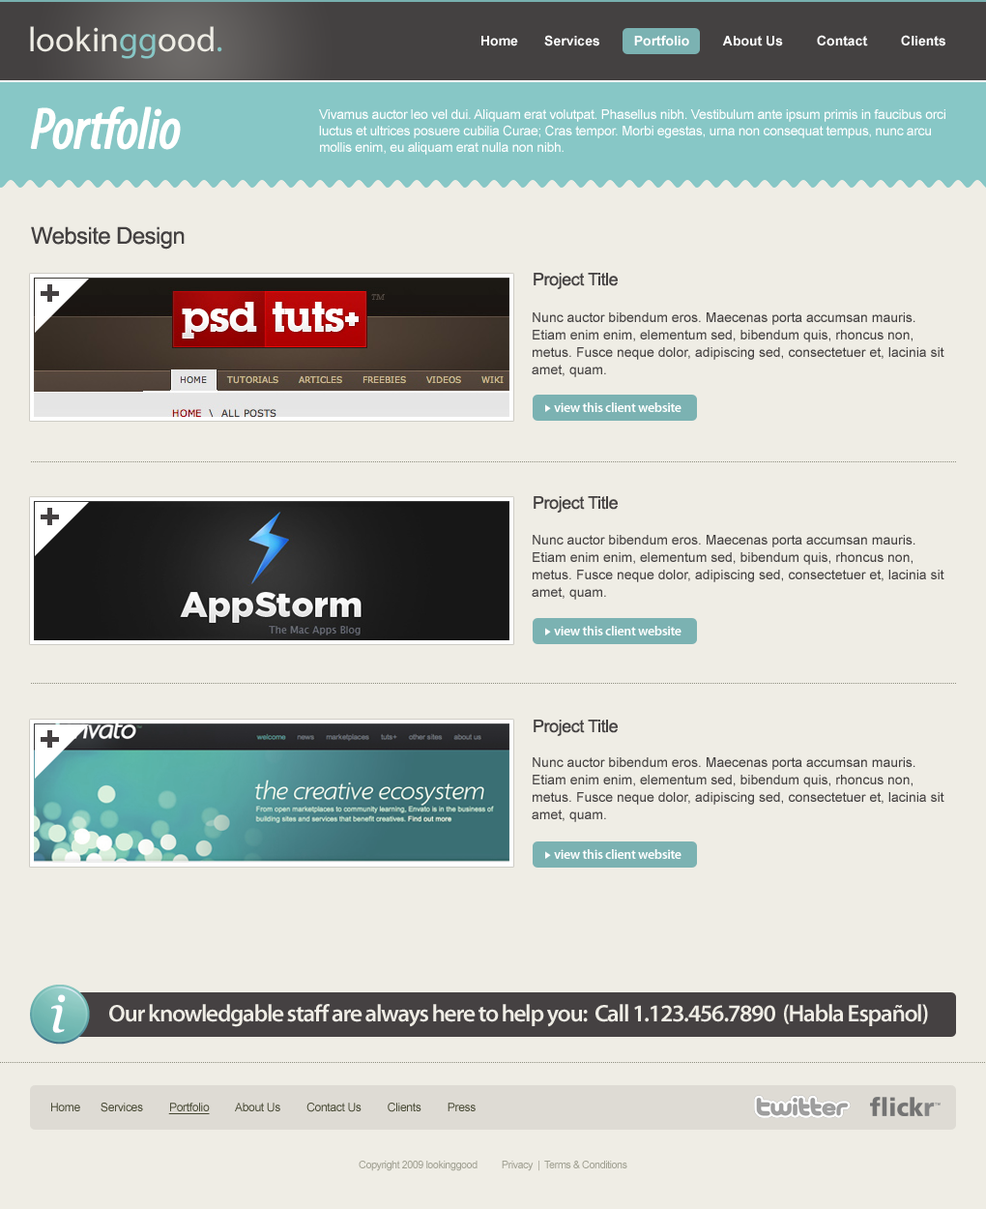
<style>
.page{position:relative;width:986px;height:1209px;background:#efede5}
.page>*{position:absolute;margin:0}
.t1{font:34.8px "MyriadPro-Regular";color:#efede5}
.t2{font:34.8px "MyriadPro-Regular";color:#87c7c6}
.t3{font:13.5px "Arial-BoldMT";color:#ffffff}
.t4{font:58px "MyriadPro-CondIt";letter-spacing:-0.025em;color:#fffffe;font-weight:bold}
.t5{font:13.5px "ArialMT";letter-spacing:-0.025em;color:#ffffff}
.t6{font:23.2px "ArialMT";letter-spacing:-0.025em;color:#444141}
.t7{font:17.4px "ArialMT";letter-spacing:-0.025em;color:#444141}
.t8{font:13.5px/17.4px "ArialMT";color:#444141}
.t9{font:13.5px "MyriadPro-Semibold";letter-spacing:-0.025em;color:#ffffff}
.t10{font:24.2px "MyriadPro-Semibold";letter-spacing:-0.05em;color:#efede5}
.t11{font:11.6px "ArialMT";letter-spacing:-0.025em;color:#464833}
.t12{font:11.6px "ArialMT";letter-spacing:-0.025em;color:#464833;text-decoration:underline}
.t13{font:10.6px "ArialMT";letter-spacing:-0.05em;color:#a1a193}
</style>
<div class="page">
<p class="t1" style="left:30px;top:26px;width:192px;height:33px">lookin<span class="t2">gg</span>ood<span class="t2">.</span></p>
<p class="t3" style="left:482px;top:35px;width:464px;height:11px">Home       Services         Portfolio         About Us         Contact         Clients</p>
<p class="t4" style="left:30px;top:106px;width:151px;height:44px">Portfolio</p>
<p class="t5" style="left:319px;top:109px;width:627px;height:46px">Vivamus auctor leo vel dui. Aliquam erat volutpat. Phasellus nibh. Vestibulum ante ipsum primis in faucibus orci luctus et ultrices posuere cubilia Curae; Cras tempor. Morbi egestas, urna non consequat tempus, nunc arcu mollis enim, eu aliquam erat nulla non nibh.</p>
<p class="t6" style="left:31px;top:226px;width:154px;height:24px">Website Design</p>
<p class="t7" style="left:534px;top:273px;width:84px;height:16px">Project Title</p>
<p class="t8" style="left:532px;top:312px;width:413px;height:65px">Nunc auctor bibendum eros. Maecenas porta accumsan mauris. Etiam enim enim, elementum sed, bibendum quis, rhoncus non, metus. Fusce neque dolor, adipiscing sed, consectetuer et, lacinia sit amet, quam.</p>
<p class="t9" style="left:554px;top:402px;width:128px;height:10px">view this client website</p>
<p class="t7" style="left:534px;top:496px;width:84px;height:17px">Project Title</p>
<p class="t8" style="left:532px;top:535px;width:413px;height:65px">Nunc auctor bibendum eros. Maecenas porta accumsan mauris. Etiam enim enim, elementum sed, bibendum quis, rhoncus non, metus. Fusce neque dolor, adipiscing sed, consectetuer et, lacinia sit amet, quam.</p>
<p class="t9" style="left:554px;top:626px;width:128px;height:9px">view this client website</p>
<p class="t7" style="left:534px;top:720px;width:84px;height:16px">Project Title</p>
<p class="t8" style="left:532px;top:757px;width:413px;height:65px">Nunc auctor bibendum eros. Maecenas porta accumsan mauris. Etiam enim enim, elementum sed, bibendum quis, rhoncus non, metus. Fusce neque dolor, adipiscing sed, consectetuer et, lacinia sit amet, quam.</p>
<p class="t9" style="left:554px;top:849px;width:128px;height:10px">view this client website</p>
<p class="t10" style="left:109px;top:1004px;width:819px;height:23px">Our knowledgable staff are always here to help you:  Call 1.123.456.7890  (Habla Español)</p>
<p class="t11" style="left:51px;top:1102px;width:425px;height:12px">Home       Services         <span class="t12">Portfolio</span>         About Us         Contact Us         Clients         Press</p>
<p class="t13" style="left:359px;top:1160px;width:269px;height:11px">Copyright 2009 lookinggood          Privacy  |  Terms &amp; Conditions</p>
</div>
